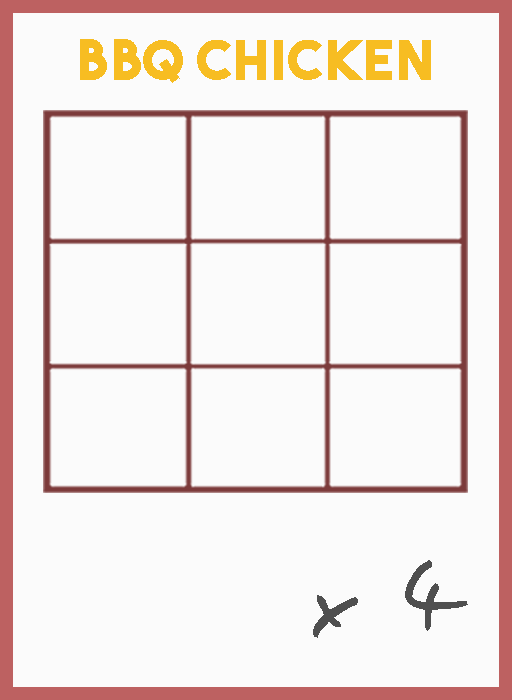
<style>
.page{position:relative;width:512px;height:700px;background:#fbfbfb}
.page>*{position:absolute;margin:0}
.t1{font:54.5px "TheBoldFont";letter-spacing:0.05em;color:#f7bd22}
.t2{font:106.1px "EasySpeech";letter-spacing:0.05em;color:#4f4f4f}
</style>
<div class="page">
<p class="t1" style="left:80px;top:39px;width:351px;height:44px">BBq chicken</p>
<p class="t2" style="left:313px;top:560px;width:155px;height:78px">x 4</p>
</div>
